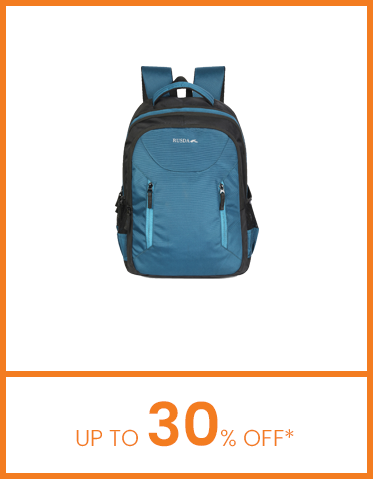
<style>
.page{position:relative;width:373px;height:479px;background:#ffffff}
.page>*{position:absolute;margin:0}
.t1{font:23px "Poppins-Light";color:#f37c20;text-transform:uppercase}
.t2{font:60px "Poppins-SemiBold";color:#f37c20;text-transform:uppercase}
</style>
<div class="page">
<p class="t1" style="left:76px;top:401px;width:218px;height:46px">UP TO <span class="t2">30</span>% OFF*</p>
</div>
